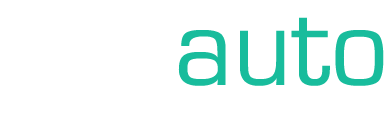
<style>
.page{position:relative;width:389px;height:125px;background:#ffffff}
.page>*{position:absolute;margin:0}
.t1{font:116px "EurostileRegular";color:#18bc9c}
.t2{font:116px "EurostileRegular";color:#ffffff}
</style>
<div class="page">
<p class="t1" style="left:7px;top:17px;width:377px;height:92px"><span class="t2">puc</span>auto</p>
</div>
